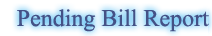
<style>
.page{position:relative;width:212px;height:36px;background:#ffffff}
.page>*{position:absolute;margin:0}
.t1{font:24px "TimesNewRomanPSMT";color:#445186}
.t2{font:27px "TimesNewRomanPSMT";color:#445186}
</style>
<div class="page">
<p class="t1" style="left:17px;top:9px;width:192px;height:23px"><span class="t2"> </span>Pending Bill Report</p>
</div>
